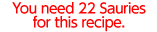
<style>
.page{position:relative;width:157px;height:32px;background:#ffffff}
.page>*{position:absolute;margin:0}
.t1{font:14px/14px "UDShinGoPro-Medium";letter-spacing:-0.04em;color:#ff0000}
</style>
<div class="page">
<p class="t1" style="left:12px;top:2px;width:134px;height:30px;text-align:center">You need 22 Sauries<br>for this recipe.</p>
</div>
